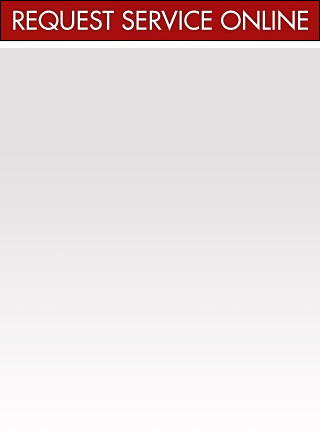
<style>
.page{position:relative;width:320px;height:432px;background:#e2e0e1}
.page>*{position:absolute;margin:0}
.t1{font:25.2px "Futura";color:#fffeff}
</style>
<div class="page">
<p class="t1" style="left:13px;top:9px;width:295px;height:22px">REQUEST SERVICE ONLINE</p>
</div>
